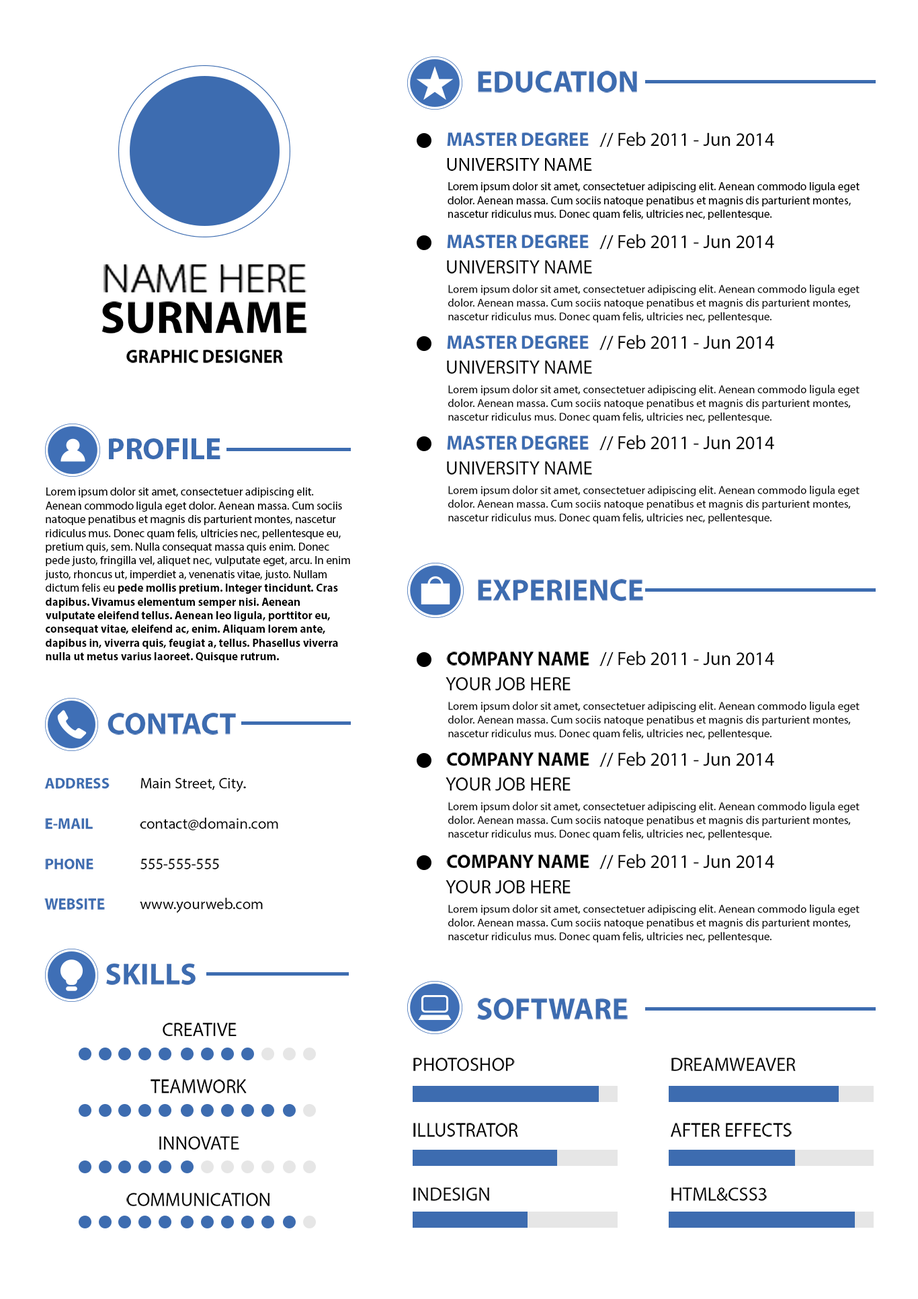
<style>
.page{position:relative;width:918px;height:1299px;background:#ffffff}
.page>*{position:absolute;margin:0}
.t1{font:30.5px "MyriadPro-Bold";color:#3d6cb0}
.t2{font:19px "MyriadPro-Bold";color:#3d6cb0}
.t3{font:19px "MyriadPro-Regular";color:#020202}
.t4{font:19px "MyriadPro-Regular";color:#000000}
.t5{font:11.4px "MyriadPro-Regular";color:#000000}
.t6{font:38.7px "MyriadPro-LightSemiExt";color:#000000}
.t7{font:45.7px "MyriadPro-Bold";color:#000000}
.t8{font:18.5px "MyriadPro-Bold";color:#000000;scale:0.96 1}
.t9{font:11.4px "MyriadPro-Bold";color:#000000}
.t10{font:19px "MyriadPro-Bold";color:#000000}
.t11{font:15.2px "MyriadPro-Bold";color:#3d6cb0}
.t12{font:15.2px "MyriadPro-Regular";color:#000000}
</style>
<div class="page">
<p class="t1" style="left:478px;top:71px;width:159px;height:22px">EDUCATION</p>
<p class="t2" style="left:447px;top:132px;width:142px;height:14px">MASTER DEGREE</p>
<p class="t3" style="left:600px;top:132px;width:174px;height:15px">// Feb 2011 - Jun 2014</p>
<p class="t4" style="left:447px;top:158px;width:145px;height:13px">UNIVERSITY NAME</p>
<p class="t5" style="left:448px;top:182px;width:412px;height:38px">Lorem ipsum dolor sit amet, consectetuer adipiscing elit. Aenean commodo ligula eget dolor. Aenean massa. Cum sociis natoque penatibus et magnis dis parturient montes, nascetur ridiculus mus. Donec quam felis, ultricies nec, pellentesque.</p>
<p class="t3" style="left:600px;top:234px;width:174px;height:15px">// Feb 2011 - Jun 2014</p>
<p class="t2" style="left:447px;top:235px;width:142px;height:13px">MASTER DEGREE</p>
<p class="t6" style="left:104px;top:264px;width:203px;height:28px">NAME HERE</p>
<p class="t4" style="left:447px;top:260px;width:145px;height:14px">UNIVERSITY NAME</p>
<p class="t5" style="left:448px;top:284px;width:412px;height:39px">Lorem ipsum dolor sit amet, consectetuer adipiscing elit. Aenean commodo ligula eget dolor. Aenean massa. Cum sociis natoque penatibus et magnis dis parturient montes, nascetur ridiculus mus. Donec quam felis, ultricies nec, pellentesque.</p>
<p class="t7" style="left:101px;top:301px;width:206px;height:32px">SURNAME</p>
<p class="t2" style="left:447px;top:335px;width:142px;height:14px">MASTER DEGREE</p>
<p class="t3" style="left:600px;top:335px;width:174px;height:15px">// Feb 2011 - Jun 2014</p>
<p class="t8" style="left:126px;top:350px;width:157px;height:13px">GRAPHIC DESIGNER</p>
<p class="t4" style="left:447px;top:360px;width:145px;height:14px">UNIVERSITY NAME</p>
<p class="t5" style="left:448px;top:384px;width:412px;height:39px">Lorem ipsum dolor sit amet, consectetuer adipiscing elit. Aenean commodo ligula eget dolor. Aenean massa. Cum sociis natoque penatibus et magnis dis parturient montes, nascetur ridiculus mus. Donec quam felis, ultricies nec, pellentesque.</p>
<p class="t2" style="left:447px;top:436px;width:142px;height:14px">MASTER DEGREE</p>
<p class="t3" style="left:600px;top:435px;width:174px;height:15px">// Feb 2011 - Jun 2014</p>
<p class="t1" style="left:109px;top:438px;width:111px;height:21px">PROFILE</p>
<p class="t4" style="left:447px;top:461px;width:145px;height:14px">UNIVERSITY NAME</p>
<p class="t5" style="left:448px;top:485px;width:412px;height:39px">Lorem ipsum dolor sit amet, consectetuer adipiscing elit. Aenean commodo ligula eget dolor. Aenean massa. Cum sociis natoque penatibus et magnis dis parturient montes, nascetur ridiculus mus. Donec quam felis, ultricies nec, pellentesque.</p>
<p class="t5" style="left:44px;top:487px;width:306px;height:175px">Lorem ipsum dolor sit amet, consectetuer adipiscing elit. Aenean commodo ligula eget dolor. Aenean massa. Cum sociis natoque penatibus et magnis dis parturient montes, nascetur ridiculus mus. Donec quam felis, ultricies nec, pellentesque eu, pretium quis, sem. Nulla consequat massa quis enim. Donec pede justo, fringilla vel, aliquet nec, vulputate eget, arcu. In enim justo, rhoncus ut, imperdiet a, venenatis vitae, justo. Nullam dictum felis eu <span class="t9">pede mollis pretium. Integer tincidunt. Cras dapibus. Vivamus elementum semper nisi. Aenean vulputate eleifend tellus. Aenean leo ligula, porttitor eu, consequat vitae, eleifend ac, enim. Aliquam lorem ante, dapibus in, viverra quis, feugiat a, tellus. Phasellus viverra nulla ut metus varius laoreet. Quisque rutrum.</span></p>
<p class="t1" style="left:478px;top:579px;width:165px;height:22px">EXPERIENCE</p>
<p class="t10" style="left:446px;top:651px;width:144px;height:14px">COMPANY NAME</p>
<p class="t3" style="left:600px;top:651px;width:174px;height:15px">// Feb 2011 - Jun 2014</p>
<p class="t4" style="left:446px;top:677px;width:125px;height:13px">YOUR JOB HERE</p>
<p class="t5" style="left:448px;top:701px;width:412px;height:38px">Lorem ipsum dolor sit amet, consectetuer adipiscing elit. Aenean commodo ligula eget dolor. Aenean massa. Cum sociis natoque penatibus et magnis dis parturient montes, nascetur ridiculus mus. Donec quam felis, ultricies nec, pellentesque.</p>
<p class="t1" style="left:108px;top:713px;width:128px;height:22px">CONTACT</p>
<p class="t10" style="left:446px;top:752px;width:144px;height:14px">COMPANY NAME</p>
<p class="t3" style="left:600px;top:752px;width:174px;height:15px">// Feb 2011 - Jun 2014</p>
<p class="t11" style="left:44px;top:778px;width:66px;height:10px">ADDRESS</p>
<p class="t12" style="left:140px;top:778px;width:106px;height:14px">Main Street, City.</p>
<p class="t4" style="left:446px;top:777px;width:125px;height:13px">YOUR JOB HERE</p>
<p class="t5" style="left:448px;top:801px;width:412px;height:39px">Lorem ipsum dolor sit amet, consectetuer adipiscing elit. Aenean commodo ligula eget dolor. Aenean massa. Cum sociis natoque penatibus et magnis dis parturient montes, nascetur ridiculus mus. Donec quam felis, ultricies nec, pellentesque.</p>
<p class="t11" style="left:45px;top:818px;width:48px;height:11px">E-MAIL</p>
<p class="t12" style="left:140px;top:817px;width:138px;height:13px">contact@domain.com</p>
<p class="t10" style="left:446px;top:854px;width:144px;height:14px">COMPANY NAME</p>
<p class="t3" style="left:600px;top:854px;width:174px;height:15px">// Feb 2011 - Jun 2014</p>
<p class="t11" style="left:45px;top:858px;width:48px;height:11px">PHONE</p>
<p class="t12" style="left:140px;top:858px;width:79px;height:11px">555-555-555</p>
<p class="t4" style="left:446px;top:880px;width:125px;height:13px">YOUR JOB HERE</p>
<p class="t11" style="left:44px;top:898px;width:61px;height:11px">WEBSITE</p>
<p class="t12" style="left:140px;top:897px;width:123px;height:16px">www.yourweb.com</p>
<p class="t5" style="left:448px;top:904px;width:412px;height:38px">Lorem ipsum dolor sit amet, consectetuer adipiscing elit. Aenean commodo ligula eget dolor. Aenean massa. Cum sociis natoque penatibus et magnis dis parturient montes, nascetur ridiculus mus. Donec quam felis, ultricies nec, pellentesque.</p>
<p class="t1" style="left:106px;top:963px;width:90px;height:22px">SKILLS</p>
<p class="t1" style="left:477px;top:998px;width:151px;height:22px">SOFTWARE</p>
<p class="t4" style="left:163px;top:1022px;width:74px;height:14px">CREATIVE</p>
<p class="t4" style="left:413px;top:1057px;width:102px;height:14px">PHOTOSHOP</p>
<p class="t4" style="left:672px;top:1057px;width:124px;height:14px">DREAMWEAVER</p>
<p class="t4" style="left:151px;top:1079px;width:96px;height:14px">TEAMWORK</p>
<p class="t4" style="left:413px;top:1123px;width:105px;height:14px">ILLUSTRATOR</p>
<p class="t4" style="left:671px;top:1123px;width:121px;height:14px">AFTER EFFECTS</p>
<p class="t4" style="left:159px;top:1136px;width:80px;height:13px">INNOVATE</p>
<p class="t4" style="left:126px;top:1192px;width:144px;height:14px">COMMUNICATION</p>
<p class="t4" style="left:413px;top:1187px;width:76px;height:14px">INDESIGN</p>
<p class="t4" style="left:672px;top:1187px;width:95px;height:14px">HTML&amp;CSS3</p>
</div>
